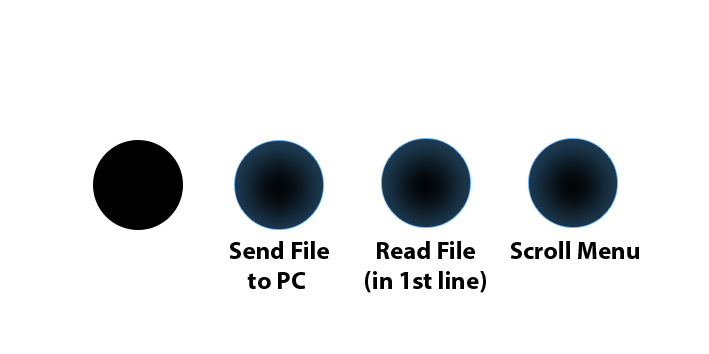
<style>
.page{position:relative;width:709px;height:354px;background:#ffffff}
.page>*{position:absolute;margin:0}
.t1{font:25px "MyriadHebrew-Bold";color:#000000}
</style>
<div class="page">
<p class="t1" style="left:229px;top:241px;width:100px;height:48px;text-align:center">Send File<br> to PC</p>
<p class="t1" style="left:365px;top:241px;width:121px;height:52px;text-align:center">Read File (in 1st line)</p>
<p class="t1" style="left:510px;top:241px;width:129px;height:18px">Scroll Menu</p>
</div>
